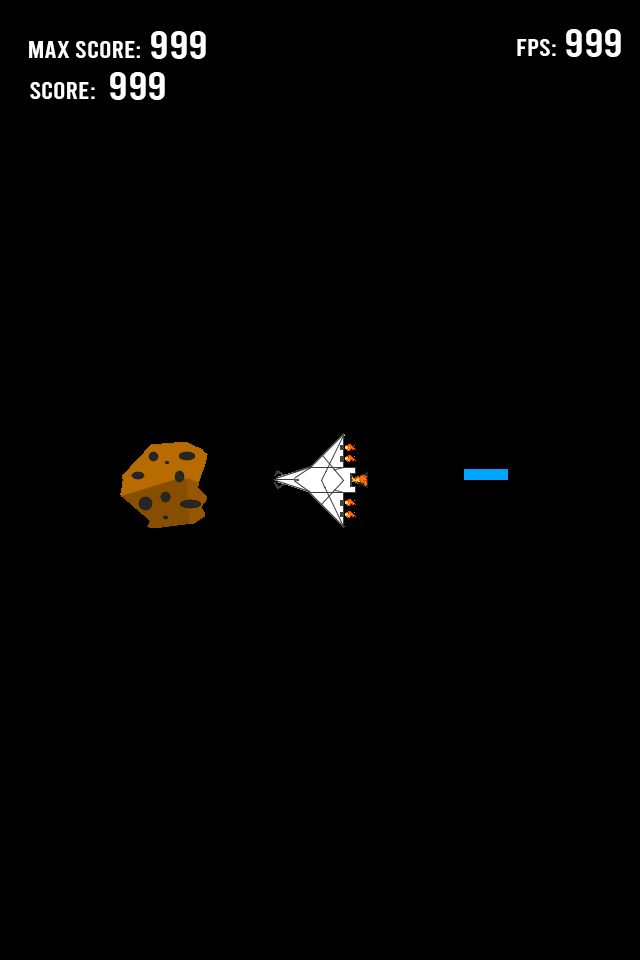
<style>
.page{position:relative;width:640px;height:960px;background:#000000}
.page>*{position:absolute;margin:0}
.t1{font:38.7px "Bebas-Regular";color:#ffffff;scale:1.17 1}
.t2{font:24.4px "Bebas-Regular";color:#ffffff;scale:1.17 1}
</style>
<div class="page">
<p class="t1" style="left:566px;top:29px;width:55px;height:28px">999</p>
<p class="t2" style="left:29px;top:41px;width:111px;height:17px">max score:</p>
<p class="t1" style="left:151px;top:31px;width:55px;height:28px">999</p>
<p class="t2" style="left:517px;top:39px;width:39px;height:17px">FPS:</p>
<p class="t1" style="left:110px;top:72px;width:55px;height:28px">999</p>
<p class="t2" style="left:30px;top:82px;width:65px;height:17px">score:</p>
</div>
